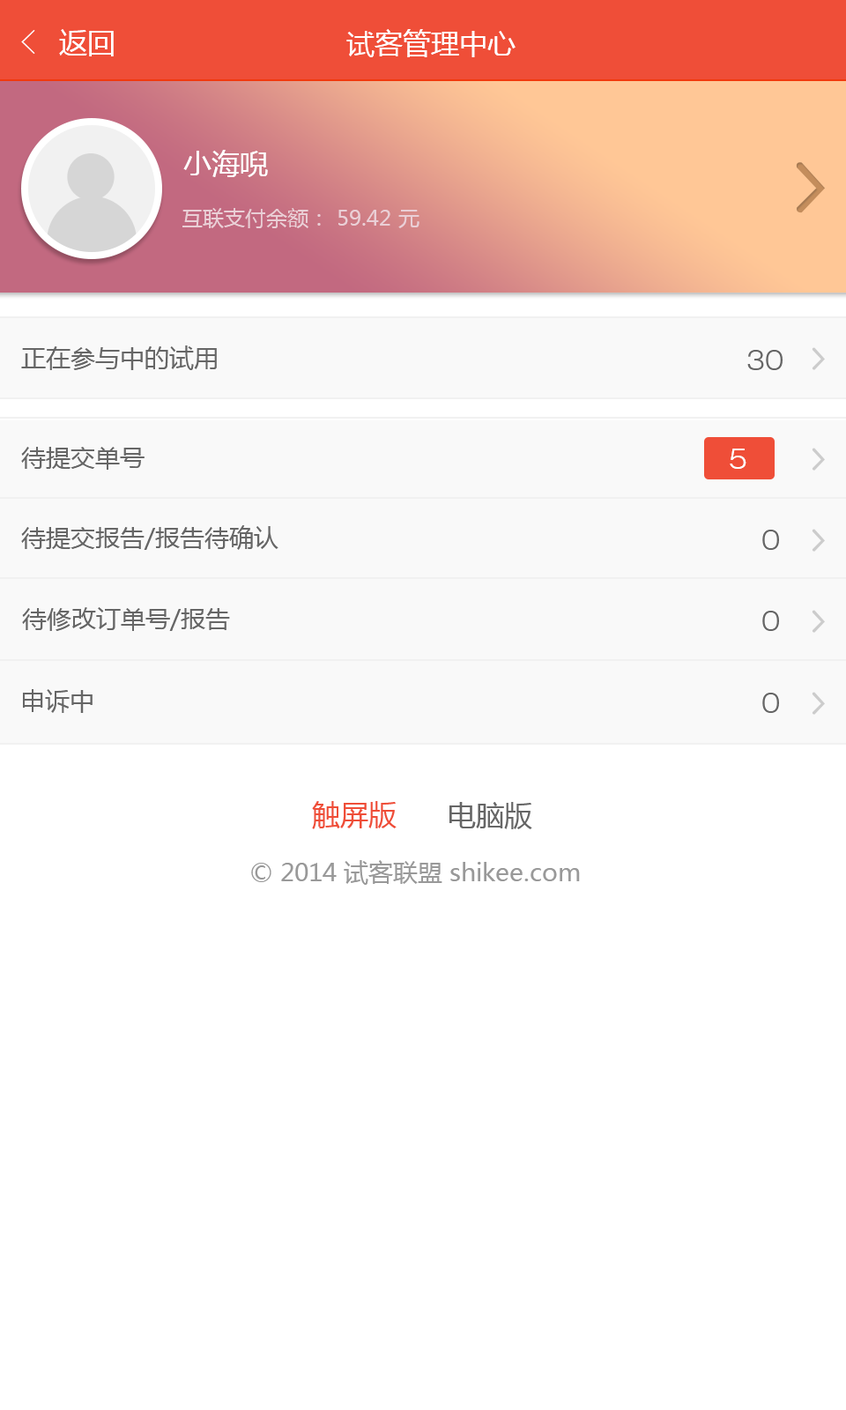
<style>
.page{position:relative;width:846px;height:1410px;background:#ffffff}
.page>*{position:absolute;margin:0}
.t1{font:35.2px "SimSun";color:#ffffff}
.t2{font:28.2px "MicrosoftYaHei";color:#ffffff}
.t3{font:21.1px "MicrosoftYaHei";color:#eacfd6}
.t4{font:24.7px "MicrosoftYaHei";color:#666666}
.t5{font:28.2px "HelveticaNeueLTPro-LtEx";color:#666666}
.t6{font:28.2px "HelveticaNeueLTPro-LtEx";color:#ffffff}
.t7{font:28.2px "MicrosoftYaHei";color:#ef4e38}
.t8{font:28.2px "MicrosoftYaHei";color:#666666}
.t9{font:24.7px "MicrosoftYaHei";color:#999999}
</style>
<div class="page">
<p class="t1" style="left:21px;top:30px;width:14px;height:24px">&lt;</p>
<p class="t2" style="left:59px;top:29px;width:55px;height:27px">返回</p>
<p class="t2" style="left:346px;top:29px;width:169px;height:28px">试客管理中心</p>
<p class="t2" style="left:183px;top:150px;width:85px;height:27px">小海唲</p>
<p class="t3" style="left:182px;top:208px;width:237px;height:20px">互联支付余额： 59.42 元</p>
<p class="t4" style="left:21px;top:345px;width:196px;height:25px">正在参与中的试用</p>
<p class="t5" style="left:747px;top:350px;width:35px;height:20px">30</p>
<p class="t4" style="left:21px;top:447px;width:123px;height:23px">待提交单号</p>
<p class="t6" style="left:730px;top:448px;width:16px;height:21px">5</p>
<p class="t4" style="left:21px;top:525px;width:257px;height:25px">待提交报告/报告待确认</p>
<p class="t5" style="left:762px;top:530px;width:17px;height:20px">0</p>
<p class="t4" style="left:22px;top:607px;width:208px;height:24px">待修改订单号/报告</p>
<p class="t5" style="left:762px;top:611px;width:17px;height:20px">0</p>
<p class="t4" style="left:23px;top:689px;width:70px;height:24px">申诉中</p>
<p class="t5" style="left:762px;top:693px;width:17px;height:20px">0</p>
<p class="t7" style="left:312px;top:801px;width:84px;height:28px">触屏版</p>
<p class="t8" style="left:449px;top:802px;width:83px;height:27px">电脑版</p>
<p class="t9" style="left:251px;top:860px;width:329px;height:25px">© 2014 试客联盟 shikee.com</p>
</div>
